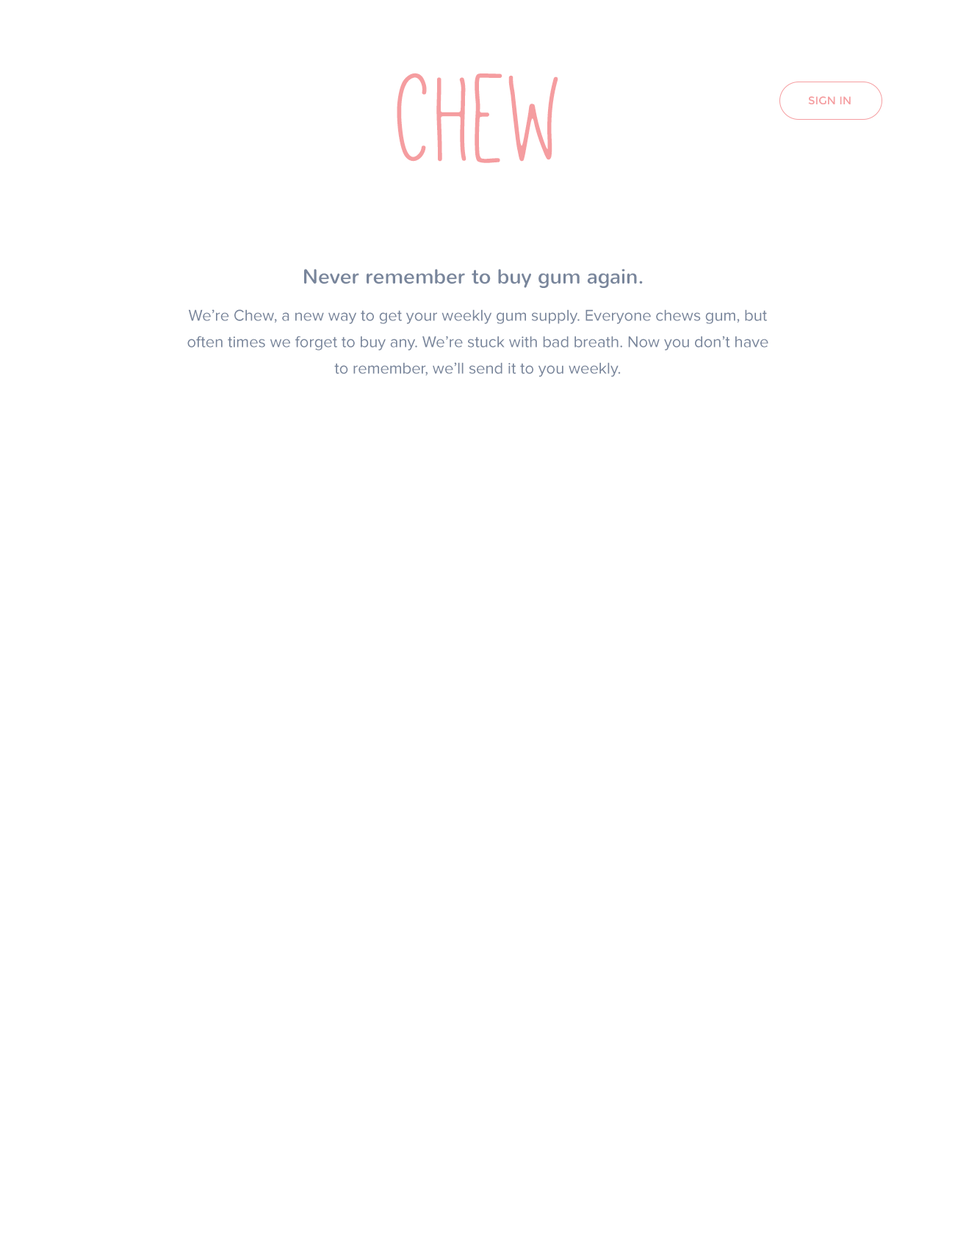
<style>
.page{position:relative;width:955px;height:1249px;background:#ffffff}
.page>*{position:absolute;margin:0}
.t1{font:138.1px "Mathlete-Skinny";color:#f59da0}
.t2{font:11px "Montserrat-Regular";color:#f59da0;text-transform:uppercase}
.t3{font:20.6px "Nunito-Regular";color:#78859b}
.t4{font:16.2px/26.4px "ProximaNova-Regular";color:#78859b}
</style>
<div class="page">
<p class="t1" style="left:397px;top:73px;width:161px;height:90px">Chew</p>
<p class="t2" style="left:808px;top:96px;width:43px;height:8px">sign in</p>
<p class="t3" style="left:304px;top:269px;width:339px;height:19px">Never remember to buy gum again.</p>
<p class="t4" style="left:187px;top:309px;width:581px;height:68px;text-align:center">We’re Chew, a new way to get your weekly gum supply. Everyone chews gum, but often times we forget to buy any. We’re stuck with bad breath. Now you don’t have to remember, we’ll send it to you weekly.</p>
</div>
